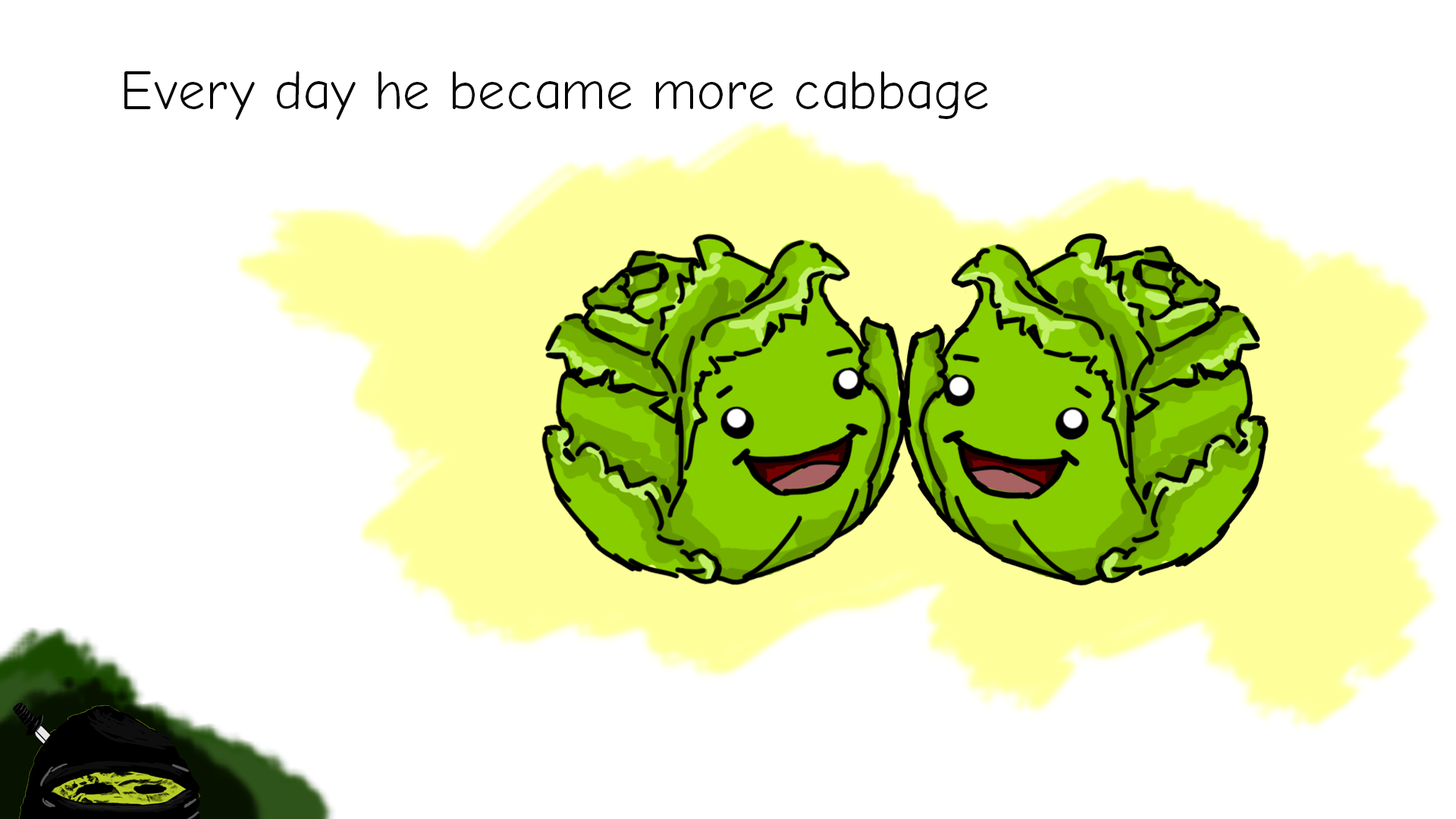
<style>
.page{position:relative;width:1456px;height:819px;background:#ffffff}
.page>*{position:absolute;margin:0}
.t1{font:54.6px "ComicNeue";color:#070707}
</style>
<div class="page">
<p class="t1" style="left:124px;top:71px;width:864px;height:49px">Every day he became more cabbage</p>
</div>
